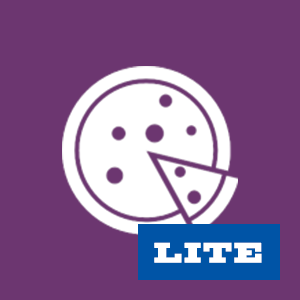
<style>
.page{position:relative;width:300px;height:300px;background:#6c3670}
.page>*{position:absolute;margin:0}
.t1{font:26px "BlackoakStd";letter-spacing:0.155em;color:#ffffff;font-weight:bold;scale:0.59 1}
</style>
<div class="page">
<p class="t1" style="left:154px;top:242px;width:108px;height:21px">LITE</p>
</div>
